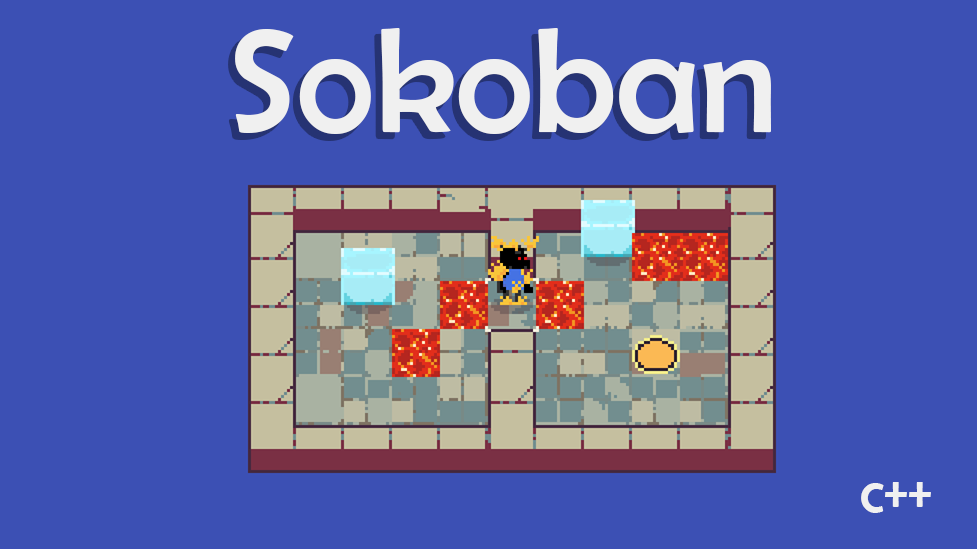
<style>
.page{position:relative;width:977px;height:549px;background:#3c50b4}
.page>*{position:absolute;margin:0}
.t1{font:150px "BerlinSansFB-Reg";color:#f0f0f0}
.t2{font:60px "BerlinSansFB-Reg";color:#f0f0f0}
</style>
<div class="page">
<p class="t1" style="left:235px;top:28px;width:536px;height:106px">Sokoban</p>
<p class="t2" style="left:861px;top:482px;width:70px;height:31px">c++</p>
</div>
